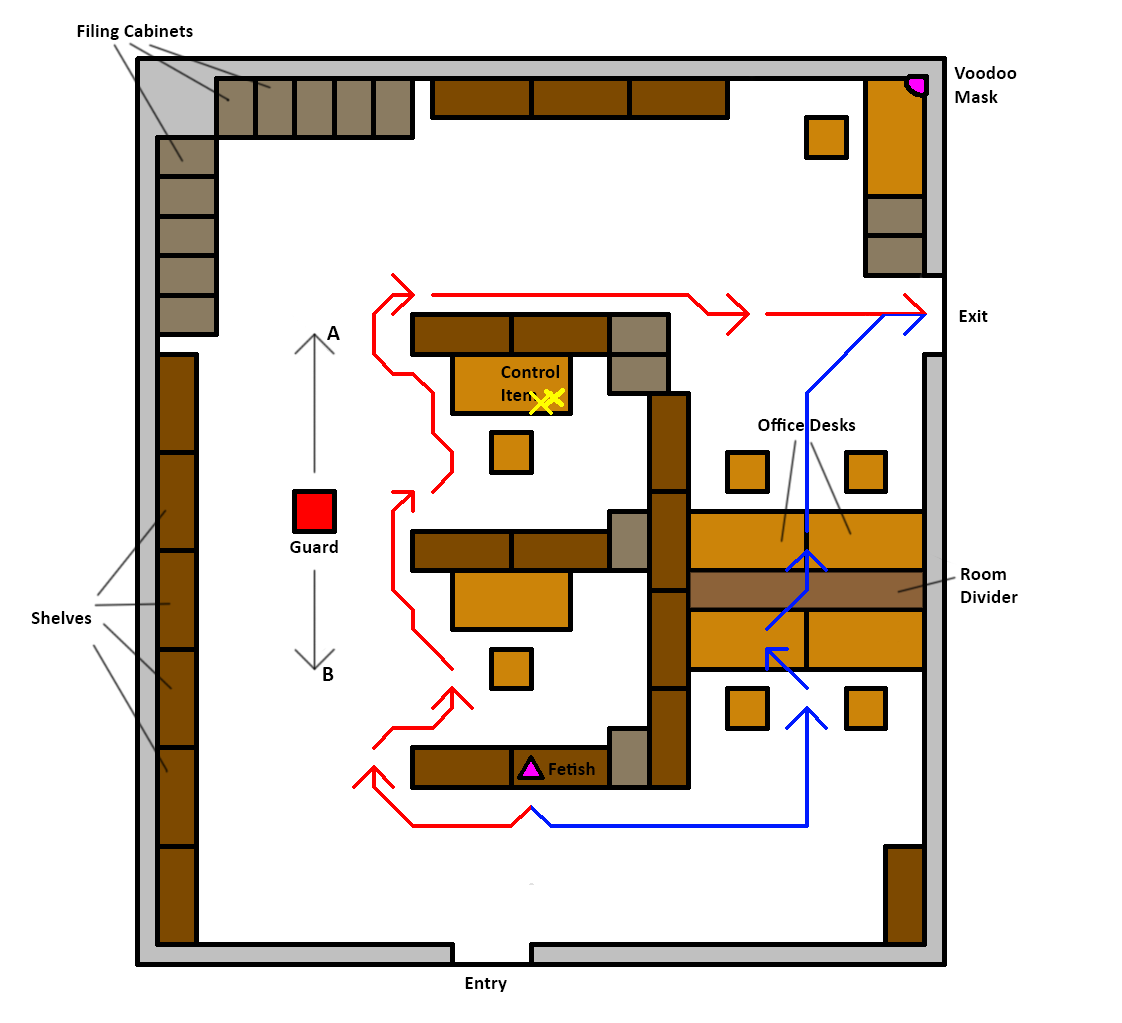
<style>
.page{position:relative;width:1122px;height:1023px;background:#ffffff}
.page>*{position:absolute;margin:0}
.t1{font:19.4px "Calibri-Bold";color:#000000}
.t2{font:22.2px "Calibri-Bold";color:#000000}
</style>
<div class="page">
<p class="t1" style="left:77px;top:24px;width:116px;height:16px">Filing Cabinets</p>
<p class="t1" style="left:954px;top:66px;width:63px;height:37px">Voodoo<br>Mask</p>
<p class="t1" style="left:959px;top:310px;width:29px;height:12px">Exit</p>
<p class="t2" style="left:327px;top:326px;width:13px;height:14px">A</p>
<p class="t1" style="left:501px;top:365px;width:58px;height:36px">Control<br>Item</p>
<p class="t1" style="left:758px;top:418px;width:98px;height:13px">Office Desks</p>
<p class="t1" style="left:290px;top:540px;width:48px;height:13px">Guard</p>
<p class="t1" style="left:961px;top:568px;width:57px;height:35px">Room<br>Divider</p>
<p class="t1" style="left:31px;top:611px;width:61px;height:13px">Shelves</p>
<p class="t2" style="left:323px;top:667px;width:11px;height:14px">B</p>
<p class="t1" style="left:549px;top:762px;width:46px;height:13px">Fetish</p>
<p class="t1" style="left:465px;top:977px;width:42px;height:15px">Entry</p>
</div>
